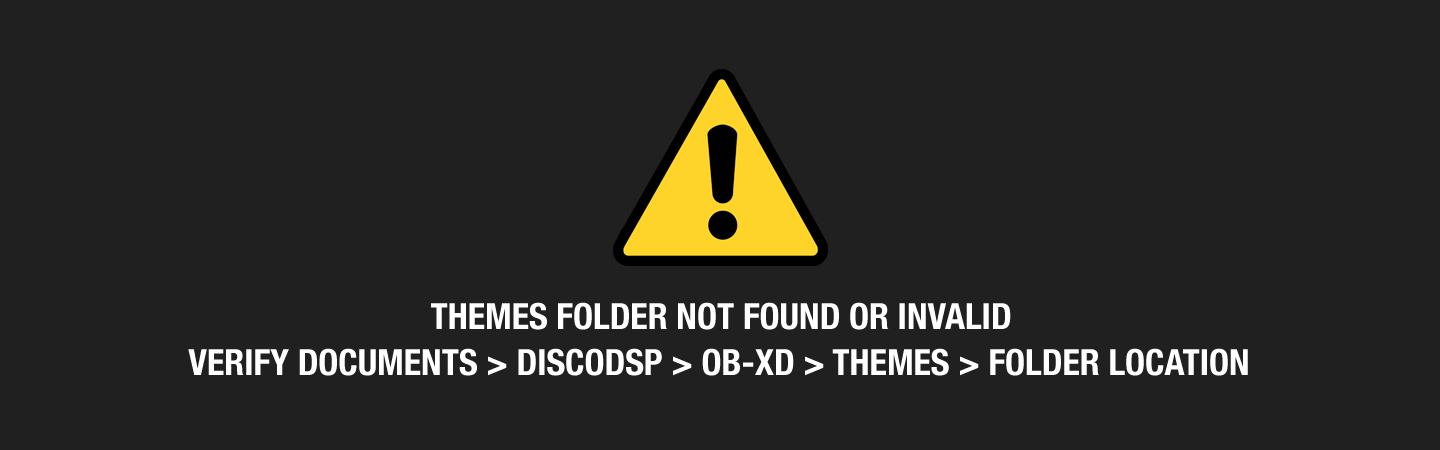
<style>
.page{position:relative;width:1440px;height:450px;background:#202020}
.page>*{position:absolute;margin:0}
.t1{font:36px "HelveticaNeue-CondensedBold";color:#ffffff}
</style>
<div class="page">
<p class="t1" style="left:431px;top:302px;width:580px;height:28px">THEMES FOLDER NOT FOUND OR INVALID</p>
<p class="t1" style="left:188px;top:348px;width:1060px;height:28px">VERIFY DOCUMENTS &gt; DISCODSP &gt; OB-XD &gt; THEMES &gt; FOLDER LOCATION</p>
</div>
